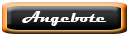
<style>
.page{position:relative;width:130px;height:37px;background:#ffffff}
.page>*{position:absolute;margin:0}
.t1{font:12px "Magneto-Bold";color:#ffffff}
</style>
<div class="page">
<p class="t1" style="left:22px;top:11px;width:85px;height:15px">Angebote</p>
</div>
